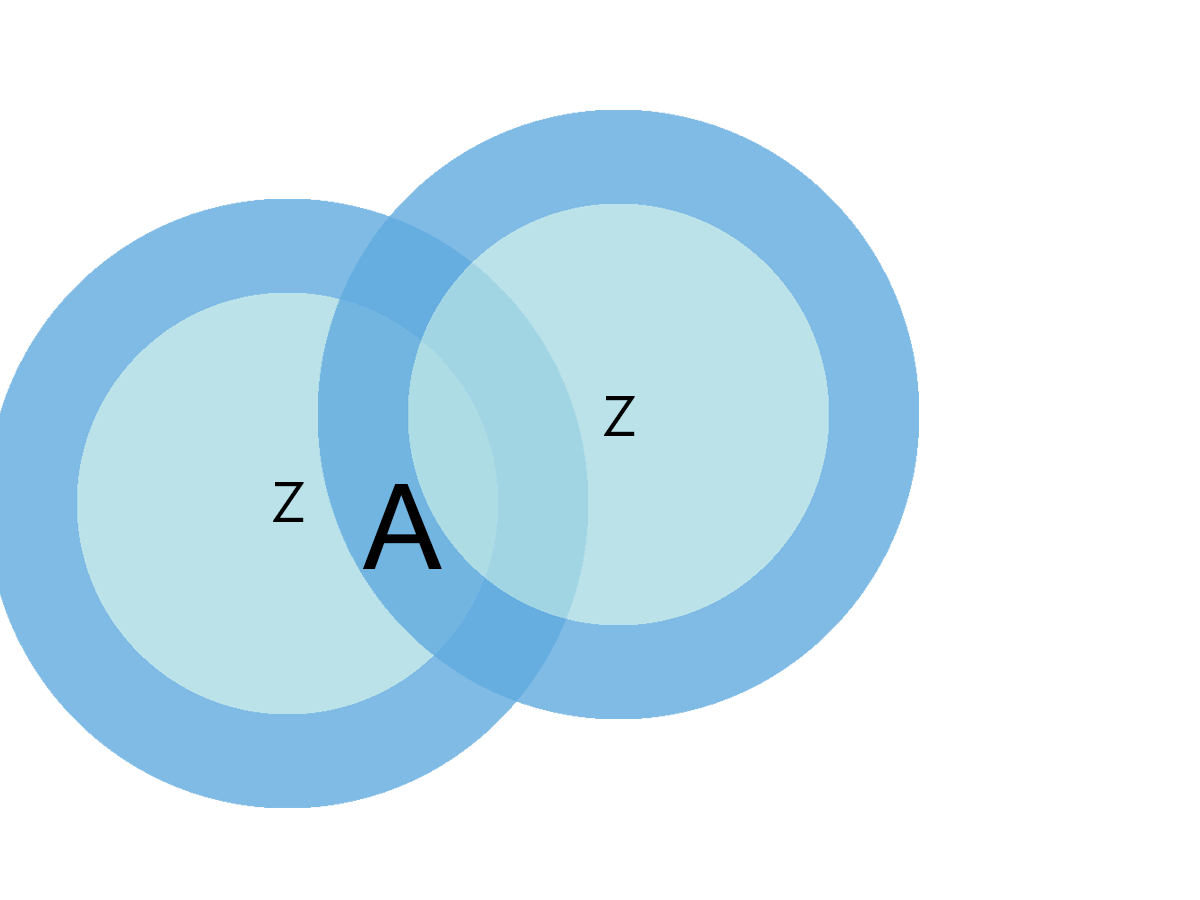
<style>
.page{position:relative;width:1200px;height:900px;background:#ffffff}
.page>*{position:absolute;margin:0}
.t1{font:57px "LaoUI";color:#000000}
.t2{font:132.4px "Vrinda";color:#000000}
</style>
<div class="page">
<p class="t1" style="left:604px;top:396px;width:31px;height:40px">Z</p>
<p class="t1" style="left:273px;top:482px;width:31px;height:40px">Z</p>
<p class="t2" style="left:363px;top:484px;width:79px;height:85px">A</p>
</div>
